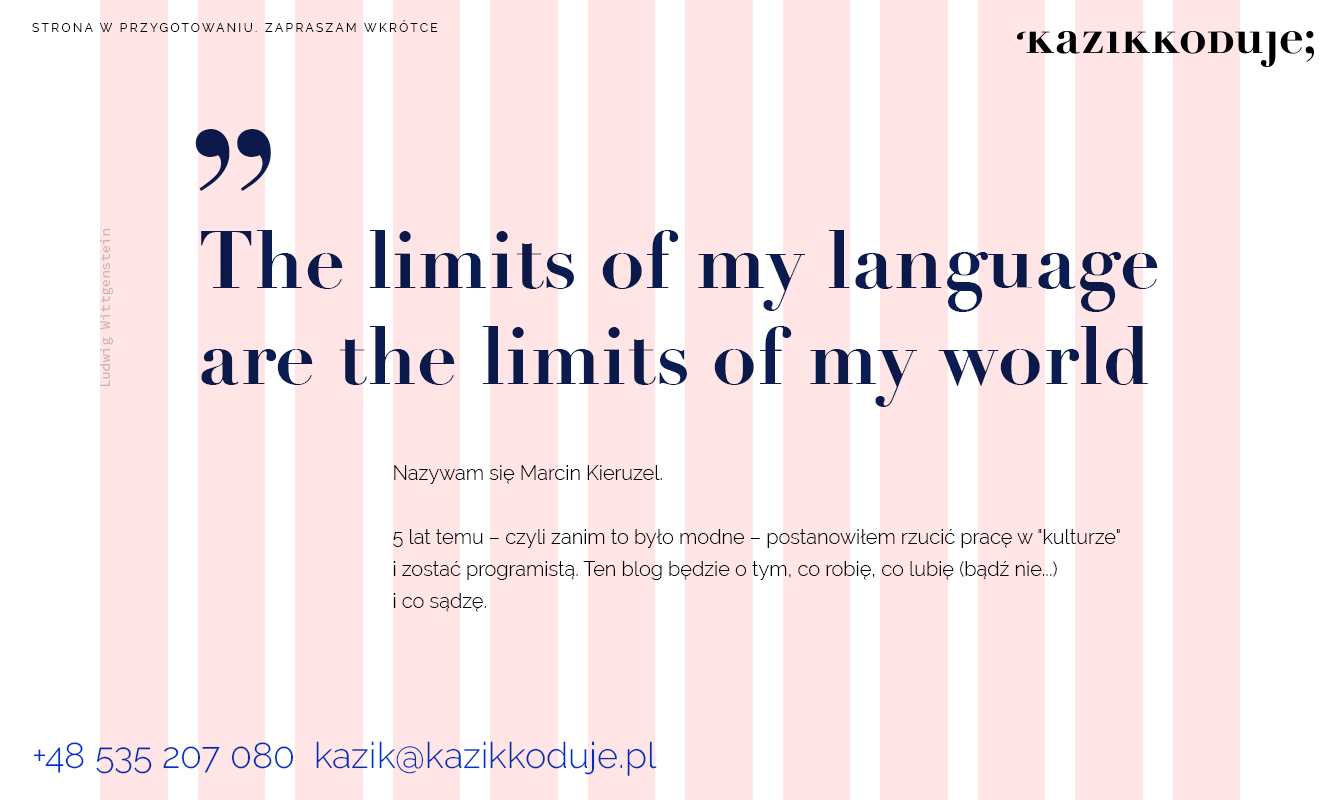
<style>
.page{position:relative;width:1340px;height:800px;background:#ffe5e5}
.page>*{position:absolute;margin:0}
.t1{font:12px "Raleway-Regular";letter-spacing:0.2em;color:#000000}
.t2{font:200px "Didot-Bold";color:#0a1c51}
.t3{font:14px "SourceCodePro-Regular";color:#cccccc}
.t4{font:80px/96px "Didot-Bold";color:#0a1c51}
.t5{font:20px/32px "Raleway-Light";color:#000000}
.t6{font:36px "Raleway-Light";color:#0033cc}
</style>
<div class="page">
<p class="t1" style="left:32px;top:20px;width:406px;height:12px">STRONA W PRZYGOTOWANIU. ZAPRASZAM WKRÓTCE</p>
<p class="t2" style="left:195px;top:129px;width:76px;height:62px">„</p>
<p class="t3" style="left:100px;top:229px;width:13px;height:157px;rotate:-90deg">Ludwig Wittgenstein</p>
<p class="t4" style="left:201px;top:230px;width:957px;height:177px">The limits of my language <br>are the limits of my world</p>
<p class="t5" style="left:393px;top:465px;width:727px;height:147px">Nazywam się Marcin Kieruzel.<br><br>5 lat temu – czyli zanim to było modne – postanowiłem rzucić pracę w "kulturze" i zostać programistą. Ten blog będzie o tym, co robię, co lubię (bądź nie...) <br>i co sądzę.</p>
<p class="t6" style="left:33px;top:741px;width:624px;height:35px">+48 535 207 080  kazik@kazikkoduje.pl</p>
</div>
